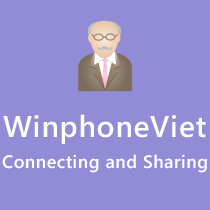
<style>
.page{position:relative;width:210px;height:210px;background:#928cd7}
.page>*{position:absolute;margin:0}
.t1{font:30px "SegoeWP-Semibold";letter-spacing:0.025em;color:#ffffff}
.t2{font:18px "SegoeWP-Semibold";letter-spacing:0.025em;color:#fefefe}
</style>
<div class="page">
<p class="t1" style="left:3px;top:114px;width:203px;height:30px">WinphoneViet</p>
<p class="t2" style="left:2px;top:154px;width:205px;height:19px">Connecting and Sharing</p>
</div>
